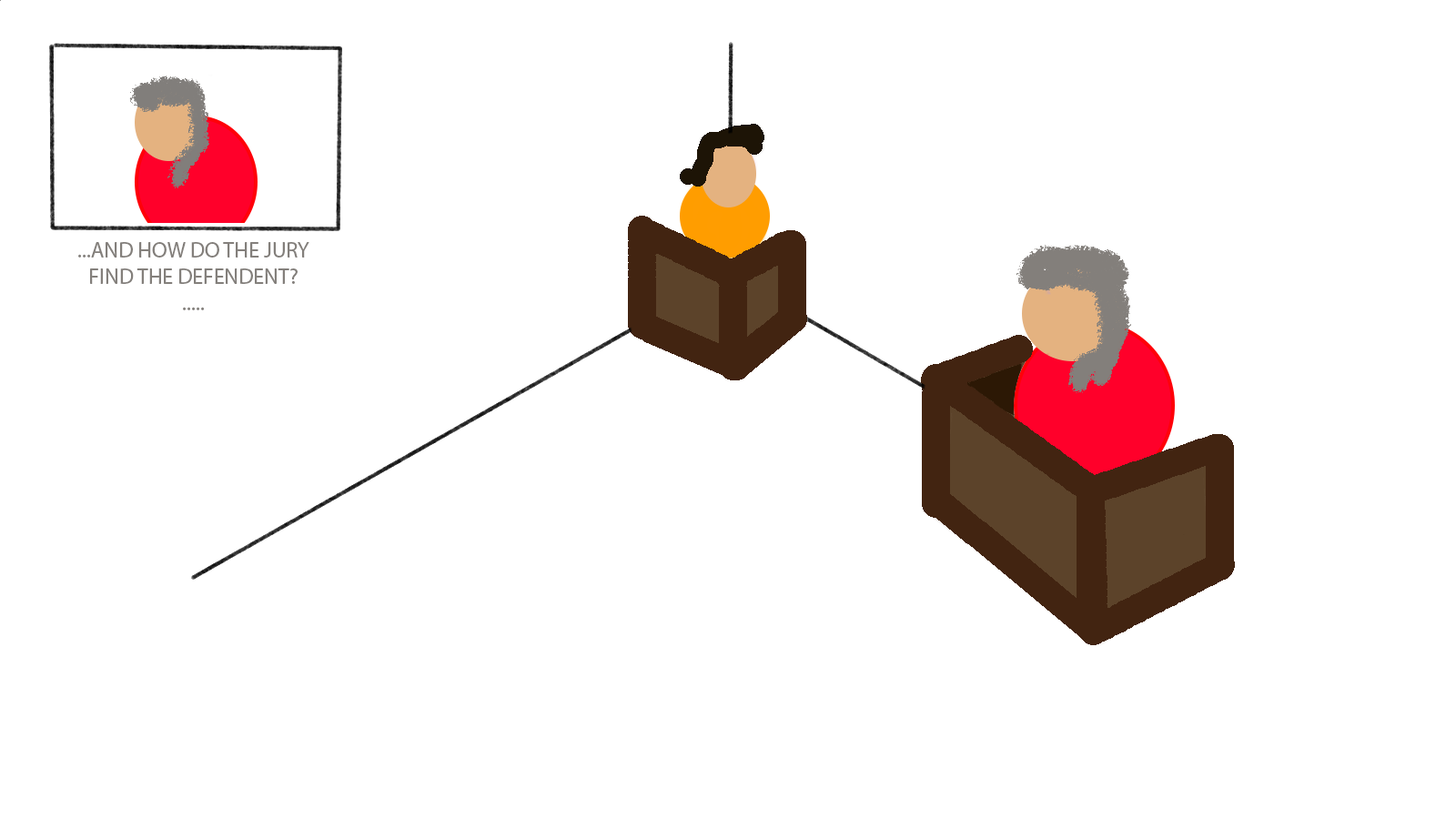
<style>
.page{position:relative;width:1456px;height:819px;background:#ffffff}
.page>*{position:absolute;margin:0}
.t1{font:21.8px "MyriadPro-Regular";color:#837f7b}
</style>
<div class="page">
<p class="t1" style="left:78px;top:242px;width:231px;height:68px;text-align:center">...AND HOW DO THE JURY FIND THE DEFENDENT?<br>.....</p>
</div>
